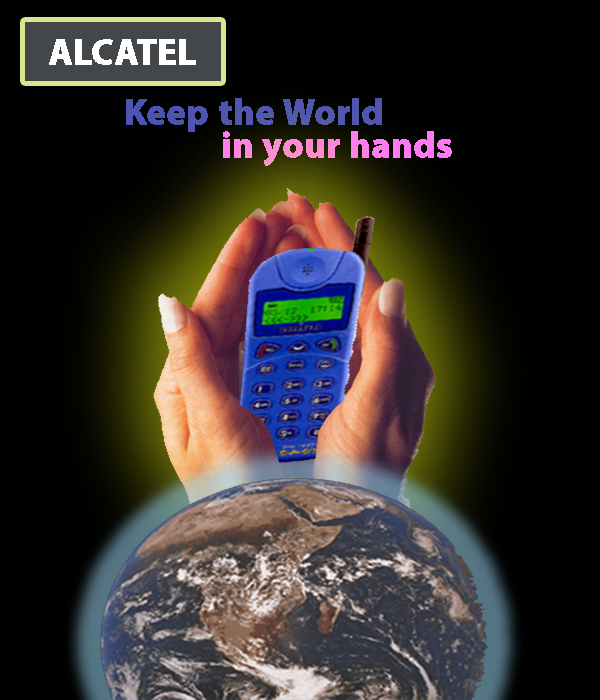
<style>
.page{position:relative;width:600px;height:700px;background:#000000}
.page>*{position:absolute;margin:0}
.t1{font:36.5px "MyriadPro-Bold";color:#ffffff;font-weight:bold}
.t2{font:36.5px "MyriadPro-Bold";color:#4c54b2;font-weight:bold}
.t3{font:36.5px "MyriadPro-Bold";color:#ff78f6;font-weight:bold}
</style>
<div class="page">
<p class="t1" style="left:49px;top:39px;width:147px;height:26px">ALCATEL</p>
<p class="t2" style="left:126px;top:98px;width:256px;height:34px">Keep the World</p>
<p class="t3" style="left:223px;top:131px;width:229px;height:35px">in your hands</p>
</div>
